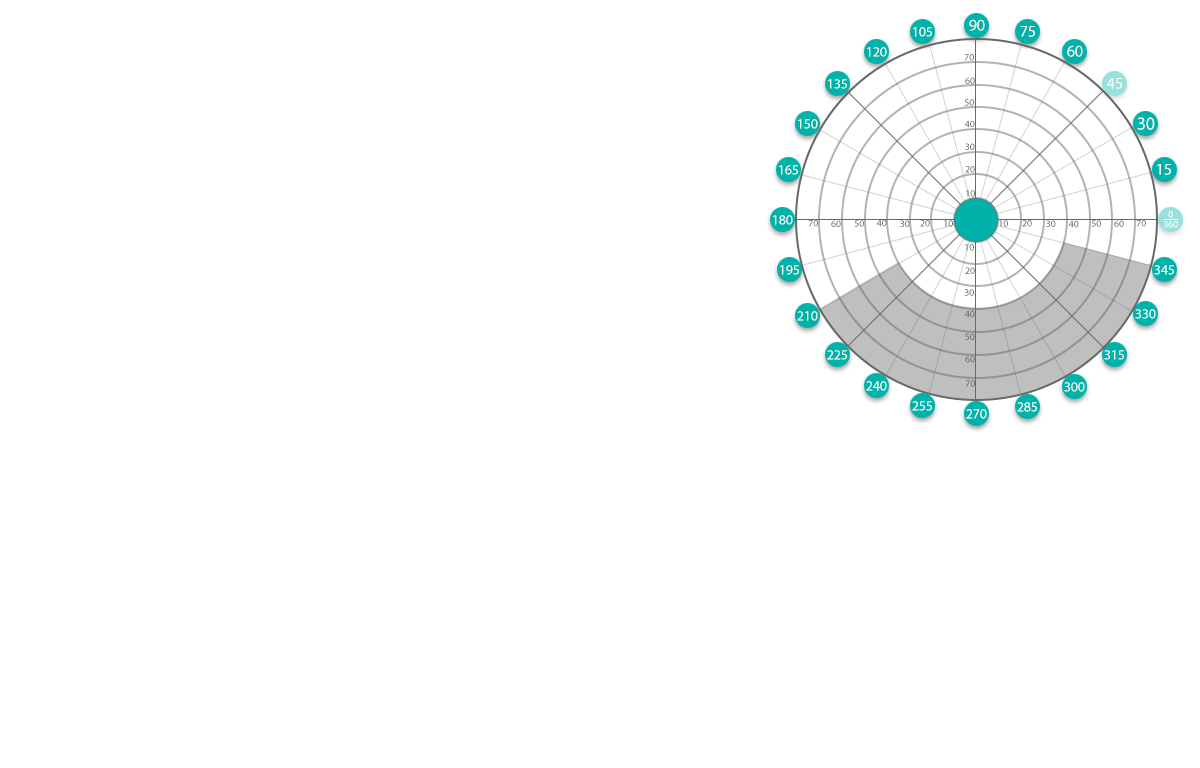
<style>
.page{position:relative;width:1200px;height:768px;background:#ffffff}
.page>*{position:absolute;margin:0}
.t1{font:14px "MyriadPro-Regular";color:#ffffff}
.t2{font:16px "MyriadPro-Regular";color:#ffffff}
.t3{font:10px "MyriadPro-Regular";color:#656a67}
.t4{font:10px "MyriadPro-Regular"}
.t5{font:18px "MyriadPro-Regular";color:#ffffff}
.t6{font:10px/10px "MyriadPro-Regular";color:#ffffff}
</style>
<div class="page">
<p class="t1" style="left:913px;top:27px;width:19px;height:10px">105</p>
<p class="t2" style="left:969px;top:19px;width:16px;height:12px">90</p>
<p class="t2" style="left:1020px;top:26px;width:15px;height:11px">75</p>
<p class="t1" style="left:867px;top:47px;width:20px;height:10px">120</p>
<p class="t3" style="left:964px;top:54px;width:10px;height:7px">70</p>
<p class="t2" style="left:1067px;top:45px;width:16px;height:12px">60</p>
<p class="t4" style="left:965px;top:77px;width:10px;height:7px">60</p>
<p class="t2" style="left:1107px;top:78px;width:15px;height:11px">45</p>
<p class="t1" style="left:828px;top:79px;width:19px;height:10px">135</p>
<p class="t3" style="left:964px;top:99px;width:10px;height:7px">50</p>
<p class="t1" style="left:798px;top:119px;width:20px;height:10px">150</p>
<p class="t3" style="left:964px;top:120px;width:11px;height:8px">40</p>
<p class="t5" style="left:1137px;top:117px;width:18px;height:13px">30</p>
<p class="t3" style="left:965px;top:143px;width:10px;height:7px">30</p>
<p class="t1" style="left:779px;top:165px;width:19px;height:10px">165</p>
<p class="t4" style="left:965px;top:166px;width:10px;height:7px">20</p>
<p class="t2" style="left:1157px;top:164px;width:14px;height:11px">15</p>
<p class="t3" style="left:966px;top:190px;width:9px;height:7px">10</p>
<p class="t1" style="left:773px;top:215px;width:20px;height:10px">180</p>
<p class="t3" style="left:808px;top:220px;width:10px;height:7px">70</p>
<p class="t4" style="left:831px;top:220px;width:10px;height:7px">60</p>
<p class="t3" style="left:854px;top:220px;width:10px;height:7px">50</p>
<p class="t3" style="left:876px;top:219px;width:11px;height:8px">40</p>
<p class="t3" style="left:900px;top:220px;width:10px;height:7px">30</p>
<p class="t4" style="left:920px;top:220px;width:10px;height:7px">20</p>
<p class="t3" style="left:944px;top:220px;width:9px;height:7px">10</p>
<p class="t3" style="left:999px;top:220px;width:9px;height:7px">10</p>
<p class="t4" style="left:1022px;top:220px;width:10px;height:7px">20</p>
<p class="t3" style="left:1046px;top:220px;width:10px;height:7px">30</p>
<p class="t3" style="left:1068px;top:220px;width:11px;height:8px">40</p>
<p class="t3" style="left:1091px;top:220px;width:10px;height:7px">50</p>
<p class="t4" style="left:1114px;top:220px;width:10px;height:7px">60</p>
<p class="t3" style="left:1136px;top:220px;width:10px;height:7px">70</p>
<p class="t6" style="left:1163px;top:211px;width:15px;height:17px;text-align:center">0<br>360</p>
<p class="t3" style="left:965px;top:244px;width:9px;height:7px">10</p>
<p class="t1" style="left:780px;top:265px;width:19px;height:10px">195</p>
<p class="t3" style="left:965px;top:267px;width:10px;height:7px">20</p>
<p class="t1" style="left:1154px;top:265px;width:20px;height:10px">345</p>
<p class="t3" style="left:964px;top:289px;width:10px;height:7px">30</p>
<p class="t1" style="left:797px;top:311px;width:21px;height:10px">210</p>
<p class="t3" style="left:964px;top:310px;width:11px;height:8px">40</p>
<p class="t1" style="left:1135px;top:309px;width:21px;height:10px">330</p>
<p class="t3" style="left:965px;top:333px;width:10px;height:7px">50</p>
<p class="t1" style="left:827px;top:350px;width:20px;height:10px">225</p>
<p class="t1" style="left:1104px;top:350px;width:20px;height:10px">315</p>
<p class="t4" style="left:965px;top:356px;width:10px;height:7px">60</p>
<p class="t1" style="left:866px;top:381px;width:21px;height:10px">240</p>
<p class="t3" style="left:965px;top:380px;width:10px;height:7px">70</p>
<p class="t1" style="left:1064px;top:382px;width:21px;height:10px">300</p>
<p class="t1" style="left:912px;top:401px;width:20px;height:10px">255</p>
<p class="t1" style="left:966px;top:409px;width:21px;height:10px">270</p>
<p class="t1" style="left:1017px;top:402px;width:20px;height:10px">285</p>
</div>
